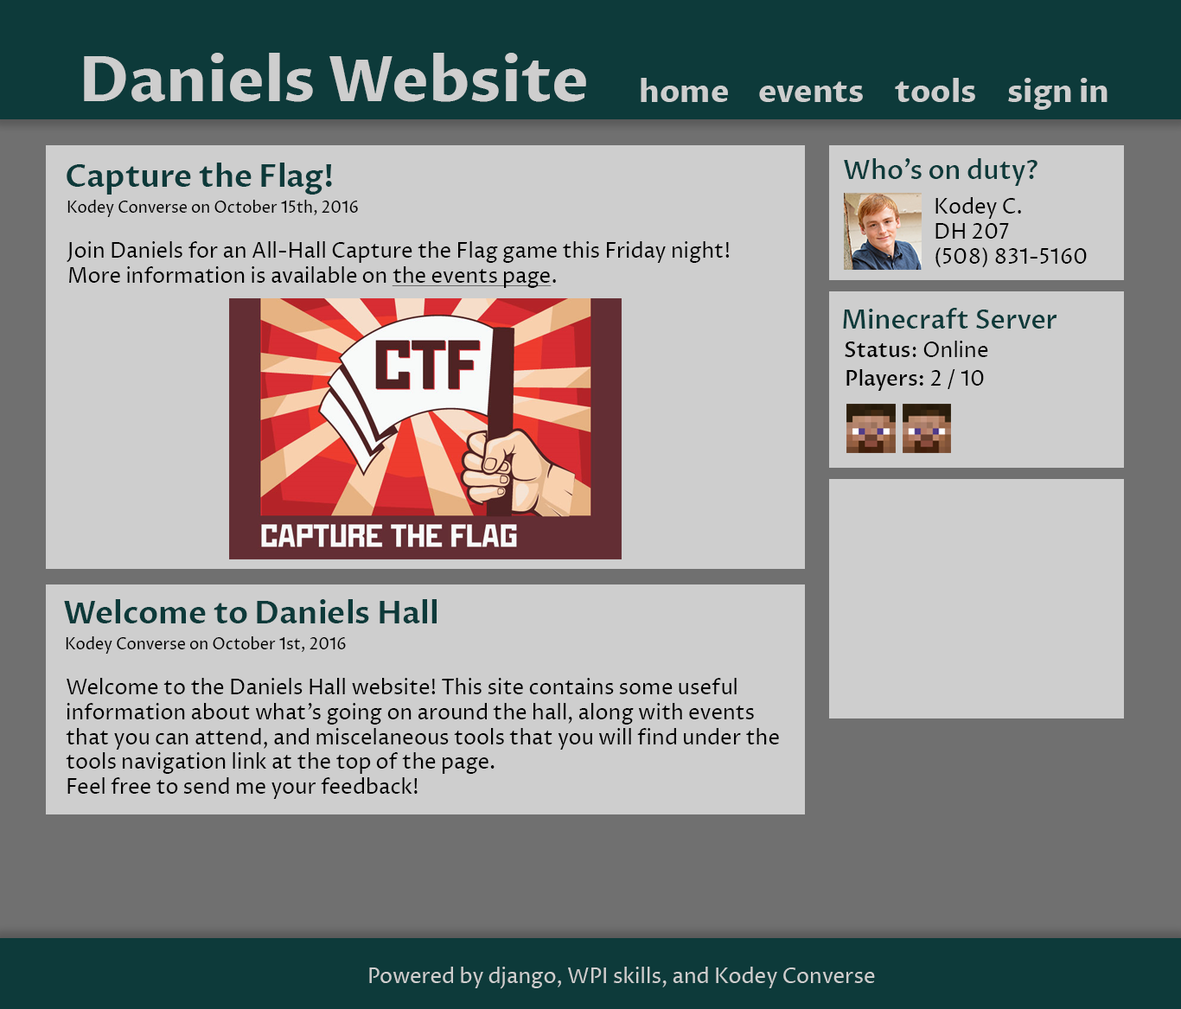
<style>
.page{position:relative;width:1181px;height:1009px;background:#cecece}
.page>*{position:absolute;margin:0}
.t1{font:62.3px "ProzaLibre-Bold";color:#cecece}
.t2{font:31.1px "ProzaLibre-Bold";color:#cecece}
.t3{font:25.9px "ProzaLibre-Medium";color:#0d3a3a}
.t4{font:31.1px "ProzaLibre-SemiBold";color:#0d3a3a}
.t5{font:20.8px "ProzaLibre-Regular";color:#000000}
.t6{font:15.6px "ProzaLibre-Regular";color:#000000}
.t7{font:20.8px "ProzaLibre-Regular";color:#000000;text-decoration:underline}
.t8{font:20.8px "ProzaLibre-Medium";color:#000000}
.t9{font:20.8px "ProzaLibre-Regular";color:#cecece}
</style>
<div class="page">
<p class="t1" style="left:84px;top:53px;width:502px;height:49px">Daniels Website</p>
<p class="t2" style="left:641px;top:78px;width:87px;height:24px">home</p>
<p class="t2" style="left:895px;top:78px;width:81px;height:24px">tools</p>
<p class="t2" style="left:1008px;top:78px;width:100px;height:32px">sign in</p>
<p class="t2" style="left:759px;top:81px;width:104px;height:21px">events</p>
<p class="t3" style="left:844px;top:158px;width:194px;height:28px">Who’s on duty?</p>
<p class="t4" style="left:67px;top:163px;width:265px;height:32px">Capture the Flag!</p>
<p class="t5" style="left:936px;top:197px;width:151px;height:71px">Kodey C.<br>DH 207<br>(508) 831-5160</p>
<p class="t6" style="left:67px;top:200px;width:291px;height:17px">Kodey Converse on October 15th, 2016</p>
<p class="t5" style="left:67px;top:241px;width:663px;height:47px">Join Daniels for an All-Hall Capture the Flag game this Friday night!<br>More information is available on <span class="t7">the events page</span>.</p>
<p class="t3" style="left:843px;top:308px;width:215px;height:21px">Minecraft Server</p>
<p class="t5" style="left:845px;top:341px;width:144px;height:16px"><span class="t8">Status</span>: Online</p>
<p class="t8" style="left:847px;top:369px;width:137px;height:22px">Players:<span class="t5"> 2 / 10</span></p>
<p class="t4" style="left:64px;top:599px;width:373px;height:25px">Welcome to Daniels Hall</p>
<p class="t6" style="left:66px;top:637px;width:280px;height:17px">Kodey Converse on October 1st, 2016</p>
<p class="t5" style="left:66px;top:678px;width:713px;height:121px">Welcome to the Daniels Hall website! This site contains some useful <br>information about what’s going on around the hall, along with events<br>that you can attend, and miscelaneous tools that you will find under the<br>tools navigation link at the top of the page.<br>Feel free to send me your feedback!</p>
<p class="t9" style="left:369px;top:967px;width:506px;height:22px">Powered by django, WPI skills, and Kodey Converse</p>
</div>
